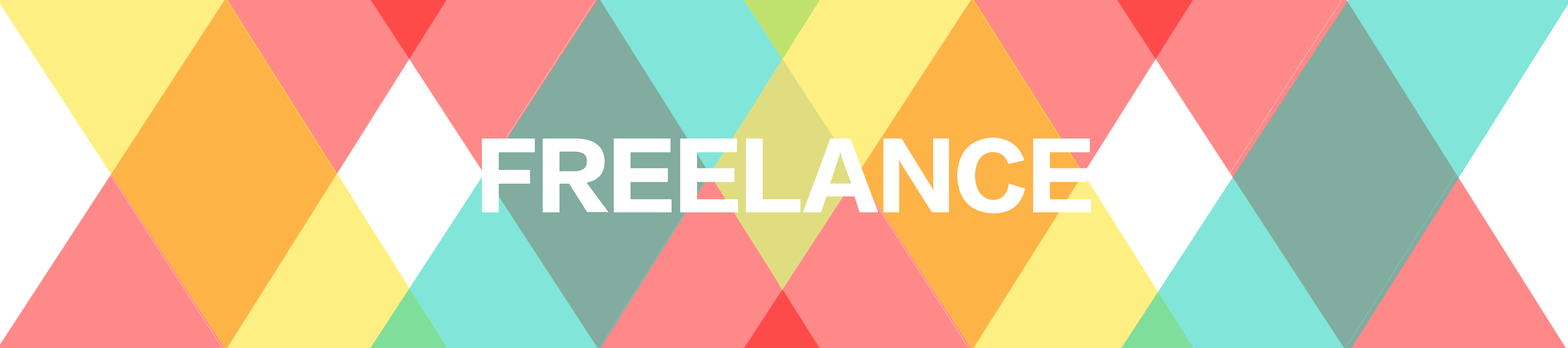
<style>
.page{position:relative;width:1568px;height:348px;background:#ff8989}
.page>*{position:absolute;margin:0}
.t1{font:85.3px "FZLTTHB--B51-0";color:#ffffff}
</style>
<div class="page">
<p class="t1" style="left:482px;top:138px;width:609px;height:76px">FREELANCE</p>
</div>
